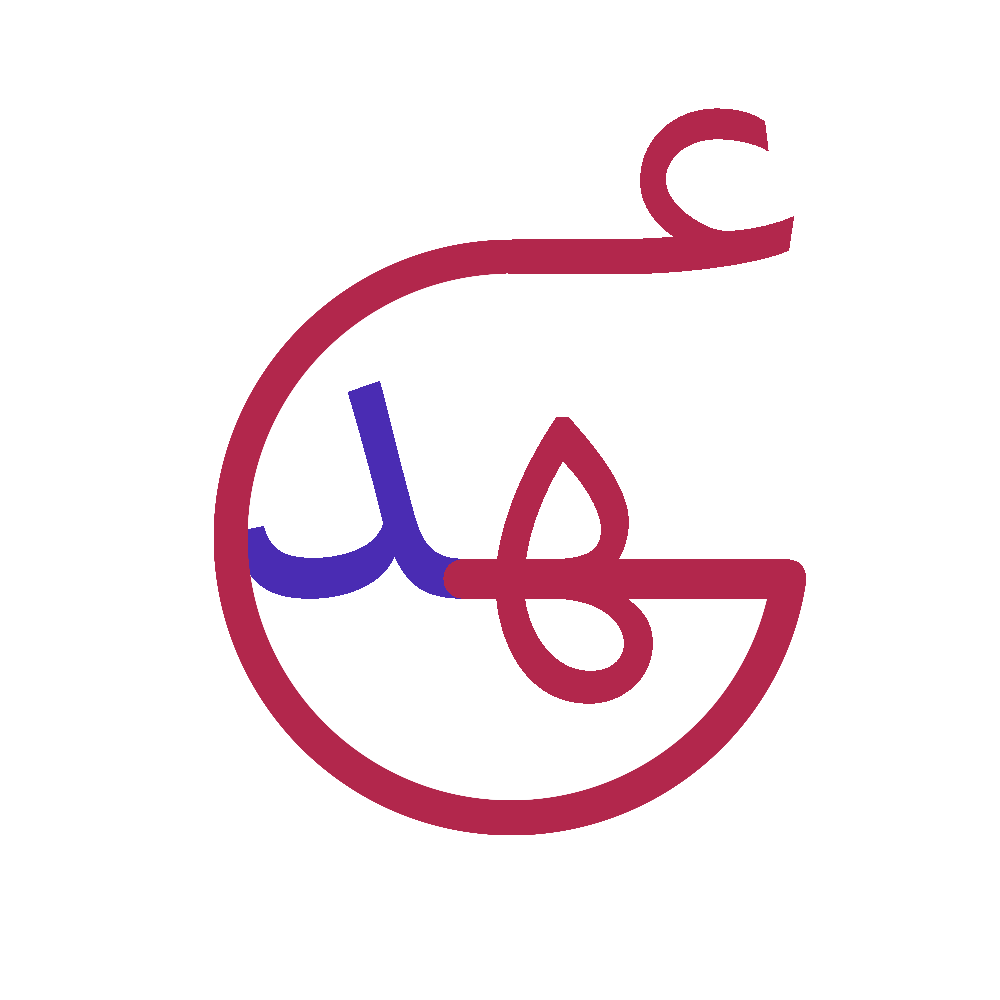
<style>
.page{position:relative;width:1000px;height:1000px;background:#ffffff}
.page>*{position:absolute;margin:0}
.t1{font:532.8px "MyriadArabic-Regular";color:#b2274c}
.t2{font:600.7px "MyriadArabic-Regular";color:#b2274c}
.t3{font:600.7px "MyriadArabic-Regular";color:#4a2cb3}
</style>
<div class="page">
<p class="t1" style="left:496px;top:108px;width:298px;height:166px">عـ</p>
<p class="t2" style="left:238px;top:381px;width:568px;height:323px">ـه<span class="t3">د</span></p>
</div>
